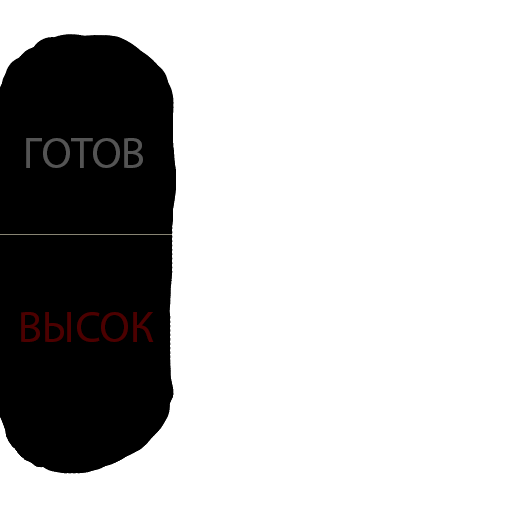
<style>
.page{position:relative;width:512px;height:512px;background:#ffffff}
.page>*{position:absolute;margin:0}
.t1{font:44px "MyriadPro-Regular";color:#545454}
.t2{font:44px "MyriadPro-Regular";color:#4c0000}
</style>
<div class="page">
<p class="t1" style="left:26px;top:138px;width:117px;height:30px">ГОТОВ</p>
<p class="t2" style="left:21px;top:312px;width:133px;height:30px">ВЫСОК</p>
</div>
